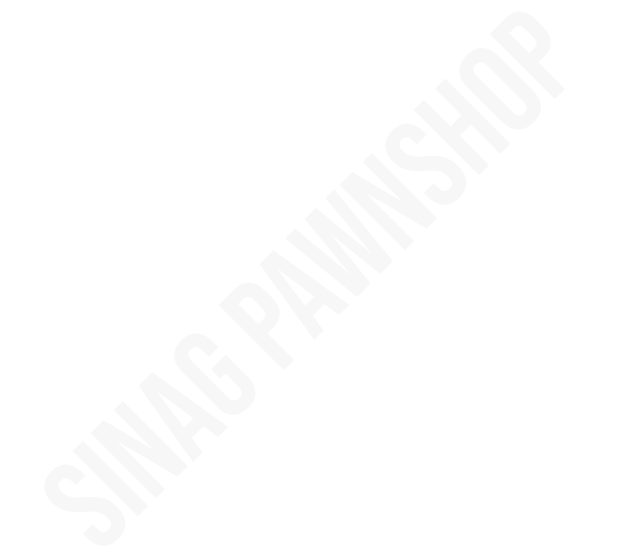
<style>
.page{position:relative;width:630px;height:554px;background:#ffffff}
.page>*{position:absolute;margin:0}
.t1{font:17.8px "BebasNeue-Regular";color:#f7f7f7}
</style>
<div class="page">
<p class="t1" style="left:44px;top:11px;width:521px;height:535px;rotate:-45deg">Sinag pawnshop</p>
</div>
